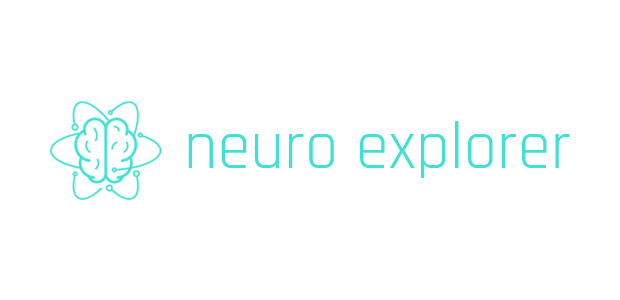
<style>
.page{position:relative;width:620px;height:300px;background:#ffffff}
.page>*{position:absolute;margin:0}
.t1{font:66.7px "Rajdhani-Regular";color:#41e0d5}
</style>
<div class="page">
<p class="t1" style="left:188px;top:121px;width:382px;height:57px">neuro explorer</p>
</div>
